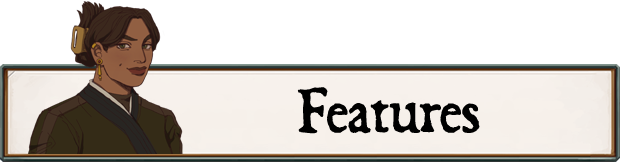
<style>
.page{position:relative;width:620px;height:162px;background:#ffffff}
.page>*{position:absolute;margin:0}
.t1{font:55px "Dominican";color:#000000}
</style>
<div class="page">
<p class="t1" style="left:297px;top:87px;width:183px;height:47px">Features</p>
</div>
